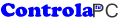
<style>
.page{position:relative;width:119px;height:20px;background:#ffffff}
.page>*{position:absolute;margin:0}
.t1{font:18.9px "CooperBlackStd";letter-spacing:0.005em;color:#0000ff}
.t2{font:18.9px "MicrosoftSansSerif";letter-spacing:0.005em;color:#363636}
.t3{font:5.3px "CooperBlackStd-Italic";letter-spacing:0.005em;color:#0000ff}
</style>
<div class="page">
<p class="t1" style="left:1px;top:3px;width:93px;height:14px">Controla</p>
<p class="t2" style="left:93px;top:3px;width:25px;height:15px">PC</p>
<p class="t3" style="left:95px;top:5px;width:6px;height:4px">tu</p>
</div>
